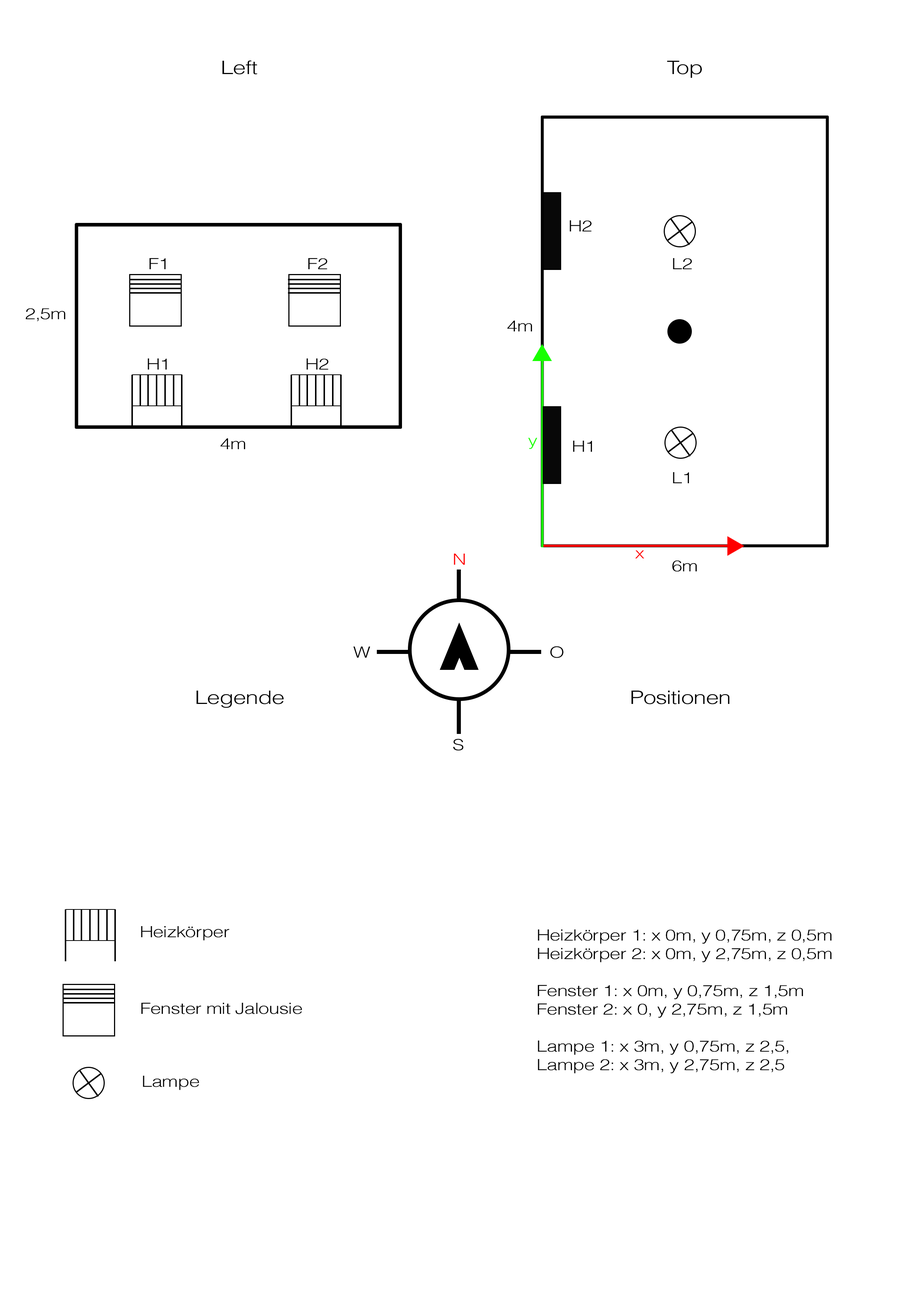
<style>
.page{position:relative;width:918px;height:1299px;background:#ffffff}
.page>*{position:absolute;margin:0}
.t1{font:18.5px "Helvetica-Light";letter-spacing:-0.025em;color:#000000;scale:1.26 1}
.t2{font:15.4px "Helvetica-Light";letter-spacing:-0.025em;color:#000000;scale:1.26 1}
.t3{font:15.4px "Helvetica-Light";letter-spacing:-0.025em;color:#18ff00;scale:1.26 1}
.t4{font:15.4px "Helvetica-Light";letter-spacing:-0.025em;color:#ff0000;scale:1.26 1}
</style>
<div class="page">
<p class="t1" style="left:223px;top:60px;width:34px;height:14px">Left</p>
<p class="t1" style="left:667px;top:61px;width:35px;height:17px">Top</p>
<p class="t2" style="left:570px;top:220px;width:22px;height:11px">H2</p>
<p class="t2" style="left:150px;top:258px;width:16px;height:11px">F1</p>
<p class="t2" style="left:308px;top:258px;width:19px;height:11px">F2</p>
<p class="t2" style="left:673px;top:258px;width:19px;height:11px">L2</p>
<p class="t2" style="left:26px;top:308px;width:40px;height:13px">2,5m</p>
<p class="t2" style="left:507px;top:320px;width:25px;height:11px">4m</p>
<p class="t2" style="left:148px;top:358px;width:19px;height:11px">H1</p>
<p class="t2" style="left:307px;top:358px;width:21px;height:11px">H2</p>
<p class="t2" style="left:220px;top:438px;width:25px;height:11px">4m</p>
<p class="t3" style="left:528px;top:438px;width:10px;height:11px">y</p>
<p class="t2" style="left:573px;top:441px;width:19px;height:11px">H1</p>
<p class="t2" style="left:673px;top:472px;width:16px;height:11px">L1</p>
<p class="t4" style="left:454px;top:553px;width:11px;height:12px">N</p>
<p class="t4" style="left:635px;top:550px;width:10px;height:8px">x</p>
<p class="t2" style="left:672px;top:560px;width:25px;height:12px">6m</p>
<p class="t2" style="left:353px;top:646px;width:17px;height:12px">W</p>
<p class="t2" style="left:550px;top:646px;width:13px;height:12px">O</p>
<p class="t1" style="left:197px;top:690px;width:87px;height:18px">Legende</p>
<p class="t1" style="left:632px;top:690px;width:98px;height:14px">Positionen</p>
<p class="t2" style="left:453px;top:739px;width:11px;height:11px">S</p>
<p class="t2" style="left:141px;top:926px;width:89px;height:14px">Heizkörper</p>
<p class="t2" style="left:538px;top:929px;width:294px;height:144px">Heizkörper 1: x 0m, y 0,75m, z 0,5m<br>Heizkörper 2: x 0m, y 2,75m, z 0,5m<br><br>Fenster 1: x 0m, y 0,75m, z 1,5m<br>Fenster 2: x 0, y 2,75m, z 1,5m<br><br>Lampe 1: x 3m, y 0,75m, z 2,5, <br>Lampe 2: x 3m, y 2,75m, z 2,5</p>
<p class="t2" style="left:141px;top:1003px;width:161px;height:11px">Fenster mit Jalousie</p>
<p class="t2" style="left:143px;top:1075px;width:56px;height:15px">Lampe</p>
</div>
